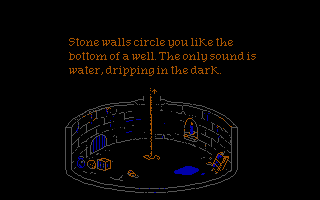
<style>
.page{position:relative;width:320px;height:200px;background:#000000}
.page>*{position:absolute;margin:0}
.t1{font:16px/14px "GloryQuest";color:#aa5500}
</style>
<div class="page">
<p class="t1" style="left:69px;top:38px;width:187px;height:38px">Stone walls circle you like the<br>bottom of a well. The only sound is<br>water, dripping in the dark.</p>
</div>
